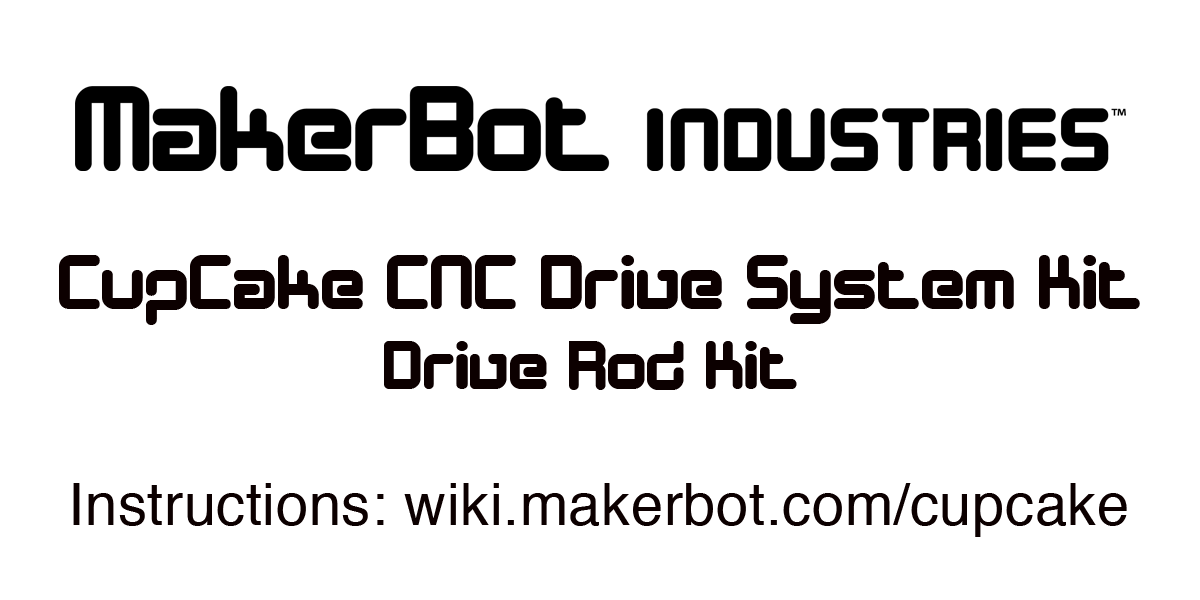
<style>
.page{position:relative;width:1200px;height:600px;background:#ffffff}
.page>*{position:absolute;margin:0}
.t1{font:79.1px "DesignerBlock";letter-spacing:0.01em;color:#0c0000}
.t2{font:70.9px "DesignerBlock";letter-spacing:0.01em;color:#0c0000}
.t3{font:57.9px "Helvetica";letter-spacing:0.01em;color:#0c0000}
</style>
<div class="page">
<p class="t1" style="left:59px;top:255px;width:1081px;height:70px">CupCake CNC Drive System Kit</p>
<p class="t2" style="left:384px;top:341px;width:413px;height:49px">Drive Rod Kit</p>
<p class="t3" style="left:73px;top:483px;width:1054px;height:54px">Instructions: wiki.makerbot.com/cupcake</p>
</div>
